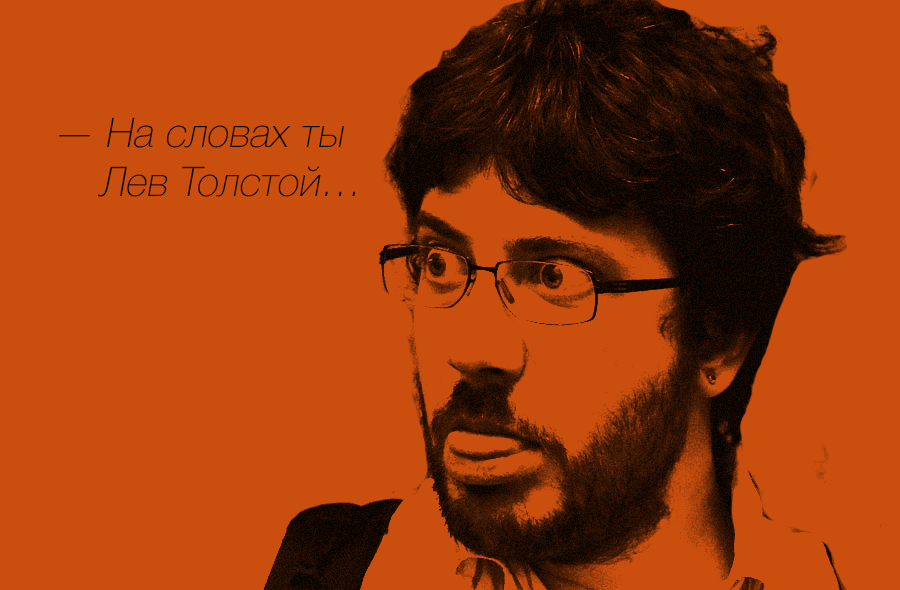
<style>
.page{position:relative;width:900px;height:590px;background:#ca4e0e}
.page>*{position:absolute;margin:0}
.t1{font:40.9px "HelveticaNeue-Thin";color:#000000;font-style:italic}
</style>
<div class="page">
<p class="t1" style="left:59px;top:117px;width:297px;height:80px">— На словах ты<br>    Лев Толстой…</p>
</div>
